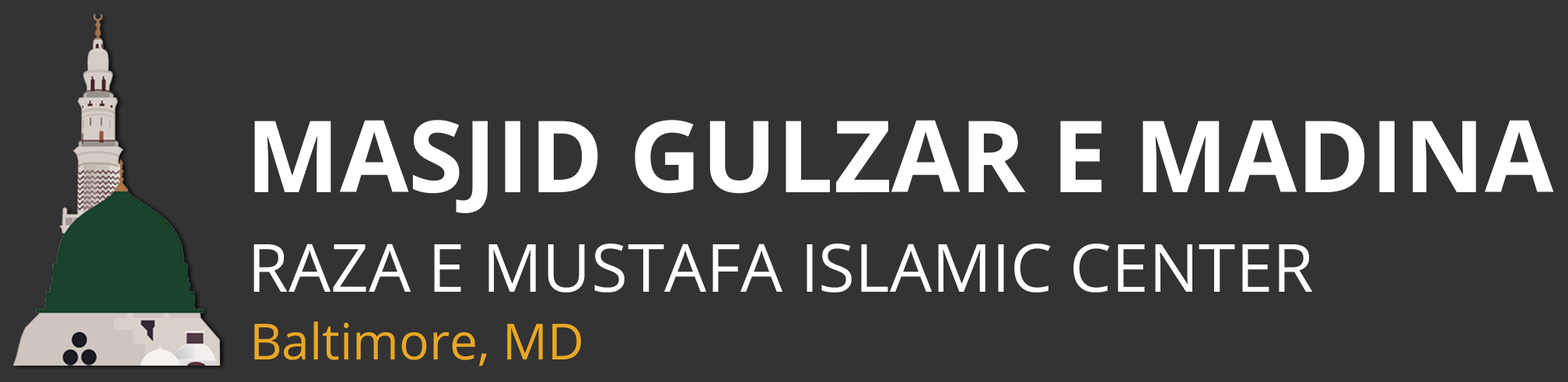
<style>
.page{position:relative;width:1568px;height:382px;background:#333333}
.page>*{position:absolute;margin:0}
.t1{font:99.9px "OpenSans-Bold";color:#ffffff}
.t2{font:66.6px "OpenSans";color:#ffffff}
.t3{font:49.9px "OpenSans";color:#e9a825}
</style>
<div class="page">
<p class="t1" style="left:254px;top:120px;width:1300px;height:93px">MASJID GULZAR E MADINA</p>
<p class="t2" style="left:254px;top:243px;width:1059px;height:49px">RAZA E MUSTAFA ISLAMIC CENTER</p>
<p class="t3" style="left:254px;top:321px;width:327px;height:45px">Baltimore, MD</p>
</div>
